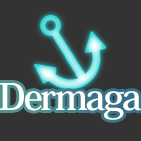
<style>
.page{position:relative;width:141px;height:141px;background:#333333}
.page>*{position:absolute;margin:0}
.t1{font:38px "HeiseiMinStd-W7";letter-spacing:-0.04em;color:#fffef9}
</style>
<div class="page">
<p class="t1" style="left:0px;top:83px;width:142px;height:37px">Dermaga</p>
</div>
